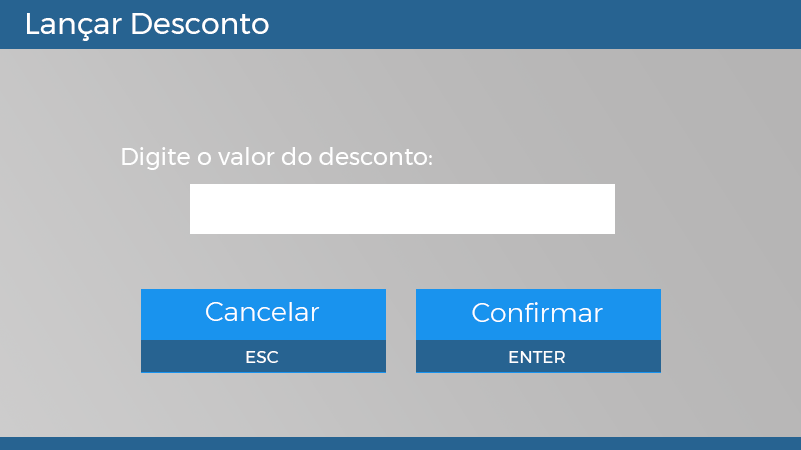
<style>
.page{position:relative;width:801px;height:450px}
.page>*{position:absolute;margin:0}
.t1{font:30px "Montserrat-Regular";color:#ffffff}
.t2{font:24px "Montserrat-Regular";color:#ffffff}
.t3{font:26.8px "Montserrat-Light";color:#ffffff}
.t4{font:16.8px "Montserrat-Regular";color:#ffffff}
</style>
<div class="page">
<p class="t1" style="left:27px;top:13px;width:242px;height:28px">Lançar Desconto</p>
<p class="t2" style="left:122px;top:147px;width:310px;height:23px">Digite o valor do desconto:</p>
<p class="t3" style="left:206px;top:302px;width:114px;height:19px">Cancelar</p>
<p class="t3" style="left:472px;top:302px;width:131px;height:20px">Confirmar</p>
<p class="t4" style="left:246px;top:351px;width:33px;height:12px">ESC</p>
<p class="t4" style="left:509px;top:351px;width:56px;height:12px">ENTER</p>
</div>
